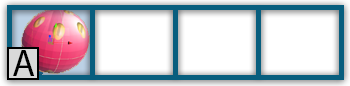
<style>
.page{position:relative;width:350px;height:86px;background:#ffffff}
.page>*{position:absolute;margin:0}
.t1{font:37.5px "MyriadPro-Regular";color:#000000}
</style>
<div class="page">
<p class="t1" style="left:13px;top:50px;width:22px;height:26px">A</p>
</div>
